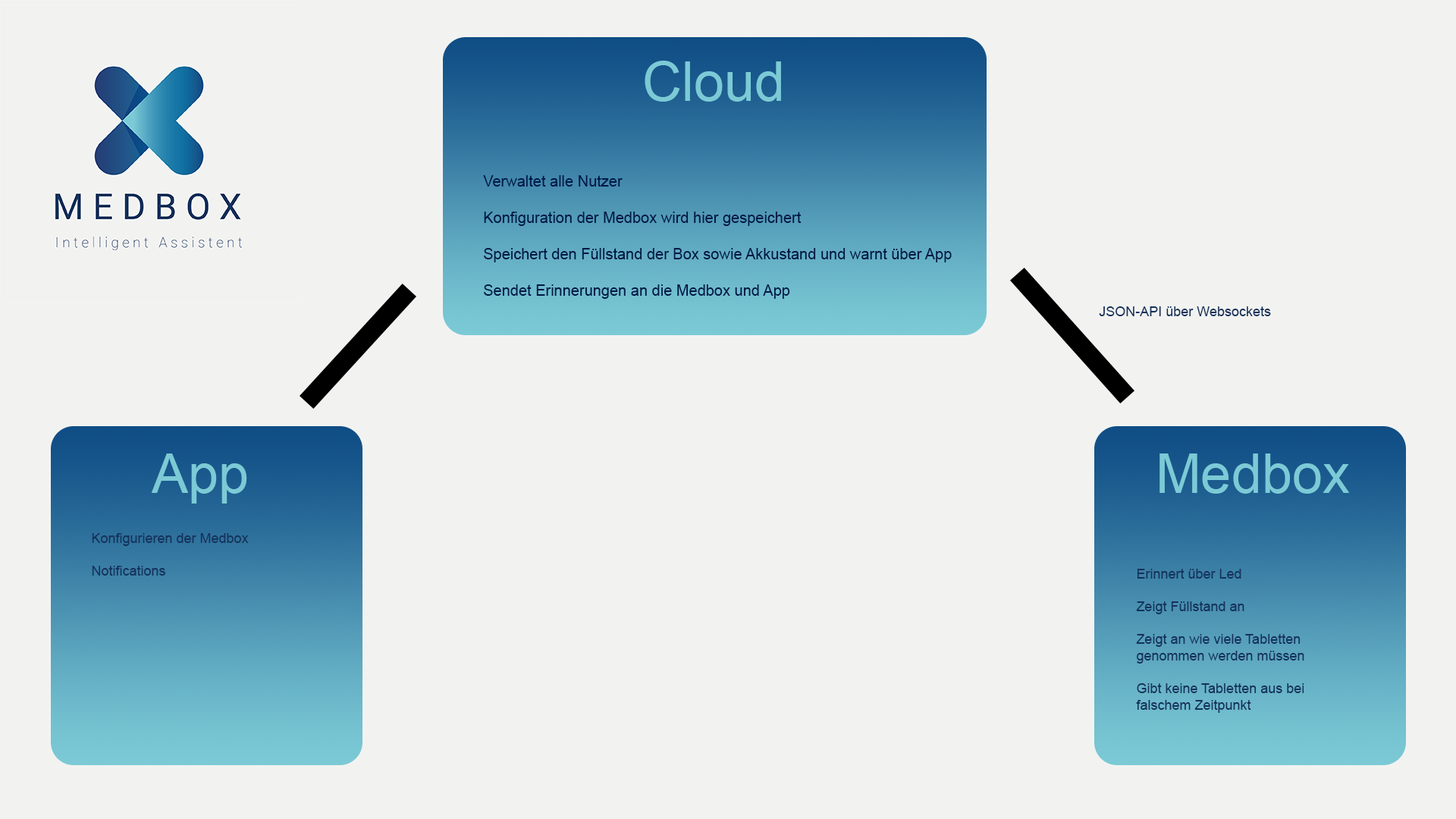
<style>
.page{position:relative;width:1456px;height:819px;background:#f2f3f1}
.page>*{position:absolute;margin:0}
.t1{font:54.6px "ArialMT";color:#7ccad6}
.t2{font:15.2px "ArialMT";color:#001846}
.t3{font:13.6px "ArialMT";color:#14325b}
</style>
<div class="page">
<p class="t1" style="left:645px;top:61px;width:136px;height:41px">Cloud</p>
<p class="t2" style="left:483px;top:175px;width:469px;height:124px">Verwaltet alle Nutzer<br><br>Konfiguration der Medbox wird hier gespeichert<br><br>Speichert den Füllstand der Box sowie Akkustand und warnt über App<br><br>Sendet Erinnerungen an die Medbox und App</p>
<p class="t3" style="left:1099px;top:306px;width:172px;height:10px">JSON-API über Websockets</p>
<p class="t1" style="left:151px;top:453px;width:96px;height:51px">App</p>
<p class="t1" style="left:1159px;top:453px;width:191px;height:41px">Medbox</p>
<p class="t3" style="left:92px;top:533px;width:157px;height:43px">Konfigurieren der Medbox<br><br>Notifications</p>
<p class="t3" style="left:1136px;top:569px;width:168px;height:144px">Erinnert über Led<br><br>Zeigt Füllstand an<br><br>Zeigt an wie viele Tabletten <br>genommen werden müssen<br><br>Gibt keine Tabletten aus bei <br>falschem Zeitpunkt</p>
</div>
